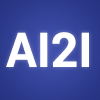
<style>
.page{position:relative;width:100px;height:100px}
.page>*{position:absolute;margin:0}
.t1{font:48px "Roboto-Bold";color:#ffffff}
</style>
<div class="page">
<p class="t1" style="left:6px;top:32px;width:83px;height:35px">AI2I</p>
</div>
